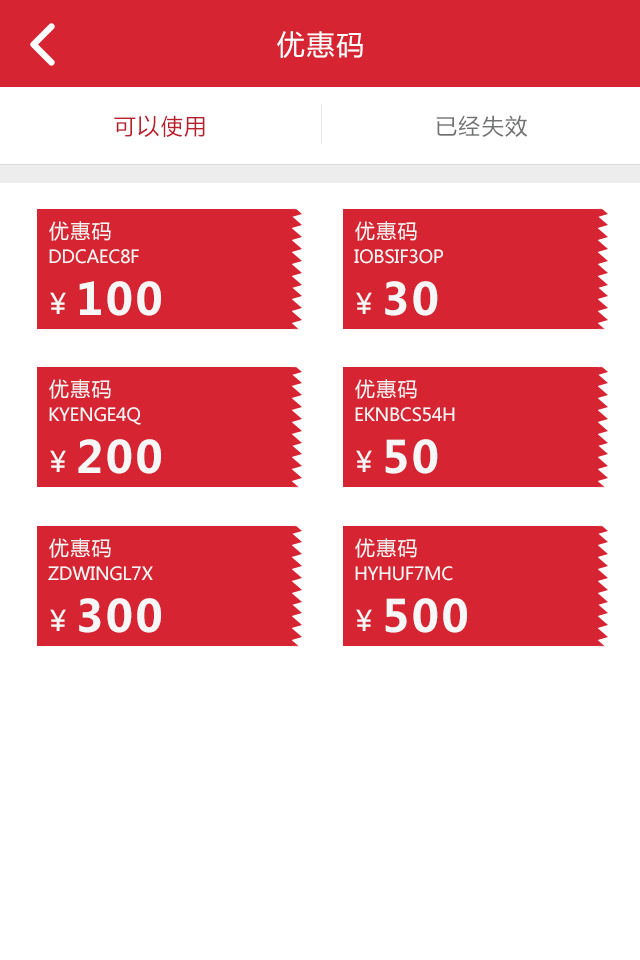
<style>
.page{position:relative;width:640px;height:960px;background:#ffffff}
.page>*{position:absolute;margin:0}
.t1{font:28px "MicrosoftYaHei";letter-spacing:0.06em;color:#ffffff}
.t2{font:22px "MicrosoftYaHei";letter-spacing:0.06em;color:#ba1f2c}
.t3{font:22px "MicrosoftYaHei";letter-spacing:0.06em;color:#707171}
.t4{font:20px "MicrosoftYaHei";letter-spacing:0.06em;color:#f7f7f7}
.t5{font:18px "MicrosoftYaHei";letter-spacing:-0.02em;color:#f7f7f7}
.t6{font:44px "MicrosoftYaHei-Bold";letter-spacing:0.06em;color:#f7f7f7}
.t7{font:28px "MicrosoftYaHei";letter-spacing:0.06em;color:#f7f7f7}
</style>
<div class="page">
<p class="t1" style="left:277px;top:31px;width:86px;height:27px">优惠码</p>
<p class="t2" style="left:114px;top:115px;width:91px;height:22px">可以使用</p>
<p class="t3" style="left:436px;top:115px;width:92px;height:22px">已经失效</p>
<p class="t4" style="left:49px;top:221px;width:62px;height:20px">优惠码</p>
<p class="t4" style="left:355px;top:221px;width:62px;height:20px">优惠码</p>
<p class="t5" style="left:49px;top:249px;width:90px;height:15px">DDCAEC8F</p>
<p class="t5" style="left:354px;top:249px;width:89px;height:15px">IOBSIF3OP</p>
<p class="t6" style="left:79px;top:281px;width:82px;height:35px">100</p>
<p class="t6" style="left:385px;top:281px;width:53px;height:35px">30</p>
<p class="t7" style="left:50px;top:292px;width:16px;height:22px">￥</p>
<p class="t7" style="left:356px;top:292px;width:16px;height:22px">￥</p>
<p class="t4" style="left:49px;top:379px;width:62px;height:20px">优惠码</p>
<p class="t4" style="left:355px;top:379px;width:62px;height:20px">优惠码</p>
<p class="t5" style="left:49px;top:407px;width:92px;height:18px">KYENGE4Q</p>
<p class="t5" style="left:355px;top:407px;width:100px;height:15px">EKNBCS54H</p>
<p class="t6" style="left:78px;top:439px;width:83px;height:35px">200</p>
<p class="t6" style="left:385px;top:439px;width:53px;height:35px">50</p>
<p class="t7" style="left:50px;top:450px;width:16px;height:22px">￥</p>
<p class="t7" style="left:356px;top:450px;width:16px;height:22px">￥</p>
<p class="t4" style="left:49px;top:538px;width:62px;height:20px">优惠码</p>
<p class="t4" style="left:355px;top:538px;width:62px;height:20px">优惠码</p>
<p class="t5" style="left:48px;top:566px;width:105px;height:15px">ZDWINGL7X</p>
<p class="t5" style="left:355px;top:566px;width:98px;height:15px">HYHUF7MC</p>
<p class="t6" style="left:79px;top:598px;width:82px;height:35px">300</p>
<p class="t6" style="left:385px;top:598px;width:82px;height:35px">500</p>
<p class="t7" style="left:50px;top:609px;width:16px;height:22px">￥</p>
<p class="t7" style="left:356px;top:609px;width:16px;height:22px">￥</p>
</div>
